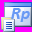
<style>
.page{position:relative;width:32px;height:32px;background:#ff00ff}
.page>*{position:absolute;margin:0}
.t1{font:18px "Calibri-BoldItalic";color:#6999f4}
</style>
<div class="page">
<p class="t1" style="left:11px;top:8px;width:19px;height:14px">Rp</p>
</div>
